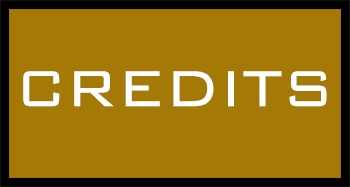
<style>
.page{position:relative;width:350px;height:187px;background:#a47905}
.page>*{position:absolute;margin:0}
.t1{font:67.5px "BankGothic-Light";color:#ffffff}
</style>
<div class="page">
<p class="t1" style="left:23px;top:71px;width:304px;height:36px">CREDITS</p>
</div>
